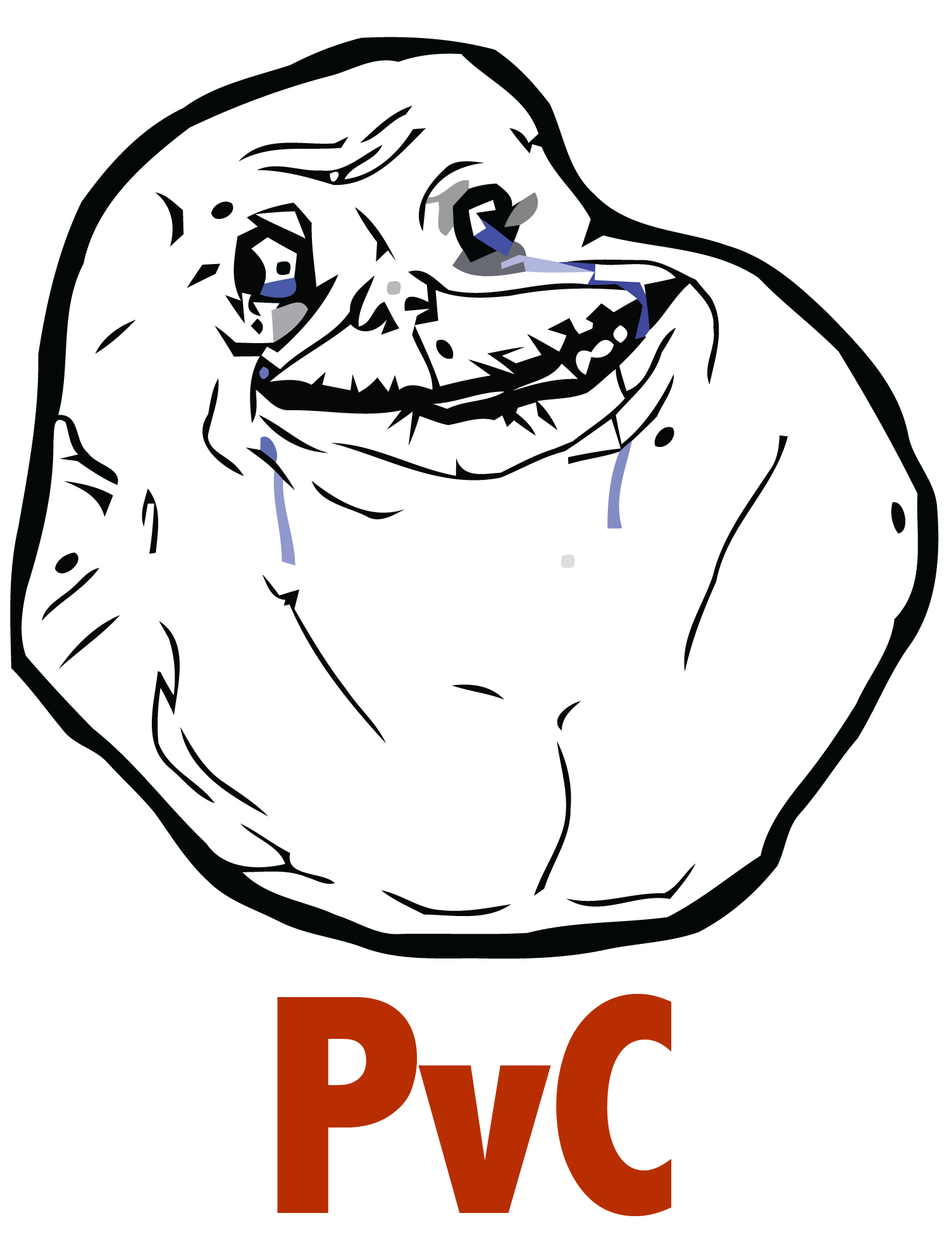
<style>
.page{position:relative;width:949px;height:1256px;background:#ffffff}
.page>*{position:absolute;margin:0}
.t1{font:316.5px "AbadiMT-CondensedExtraBold";color:#b82e00}
</style>
<div class="page">
<p class="t1" style="left:277px;top:994px;width:395px;height:222px">PvC</p>
</div>
